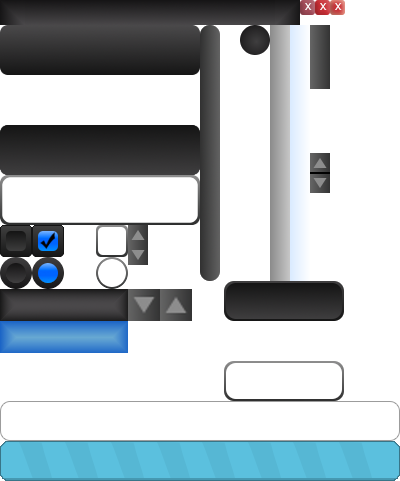
<style>
.page{position:relative;width:400px;height:481px;background:#ffffff}
.page>*{position:absolute;margin:0}
.t1{font:9px "Moire";color:#ffffff}
</style>
<div class="page">
<p class="t1" style="left:305px;top:3px;width:7px;height:7px">X</p>
<p class="t1" style="left:320px;top:3px;width:7px;height:7px">X</p>
<p class="t1" style="left:335px;top:3px;width:7px;height:7px">X</p>
</div>
